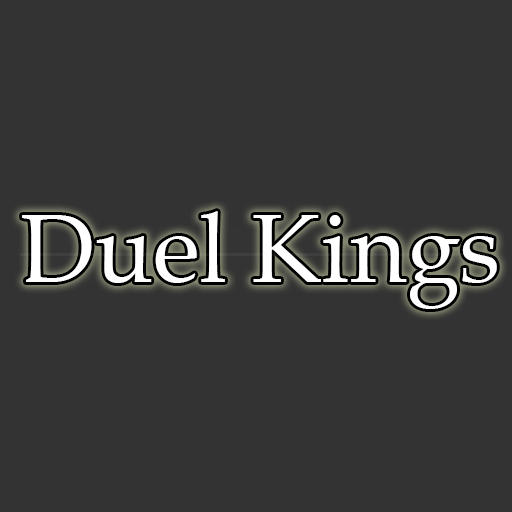
<style>
.page{position:relative;width:512px;height:512px;background:#333333}
.page>*{position:absolute;margin:0}
.t1{font:96.5px "BookAntiqua";color:#ffffff}
</style>
<div class="page">
<p class="t1" style="left:22px;top:211px;width:475px;height:98px">Duel Kings</p>
</div>
